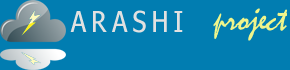
<style>
.page{position:relative;width:290px;height:70px;background:#017db1}
.page>*{position:absolute;margin:0}
.t1{font:28.8px "Nina";letter-spacing:0.18em;color:#e1e1e1}
.t2{font:36px "Mistral";letter-spacing:-0.02em;color:#eff58b}
</style>
<div class="page">
<p class="t1" style="left:70px;top:10px;width:113px;height:23px">ARASHI</p>
<p class="t2" style="left:213px;top:8px;width:74px;height:33px">project</p>
</div>
